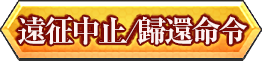
<style>
.page{position:relative;width:262px;height:61px}
.page>*{position:absolute;margin:0}
.t1{font:30px "RyuminPr6N-ExBold";letter-spacing:-0.1em;color:#fff4f2}
</style>
<div class="page">
<p class="t1" style="left:18px;top:16px;width:229px;height:29px">遠征中止/歸還命令</p>
</div>
